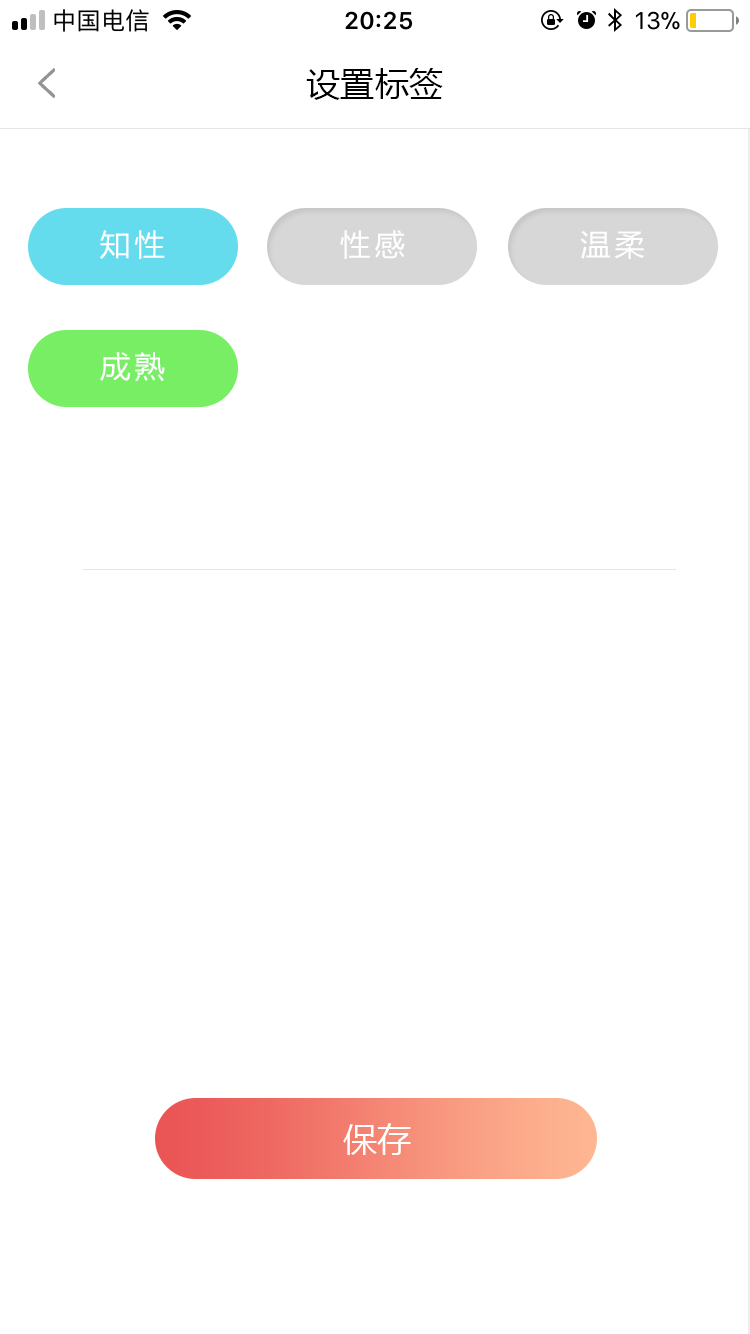
<style>
.page{position:relative;width:750px;height:1334px;background:#ffffff}
.page>*{position:absolute;margin:0}
.t1{font:34px "MicrosoftYaHei";letter-spacing:0.01em;color:#000000}
.t2{font:29.7px "MicrosoftYaHei";letter-spacing:0.13em;color:#ffffff}
.t3{font:34px "MicrosoftYaHei";letter-spacing:0.01em;color:#ffffff}
</style>
<div class="page">
<p class="t1" style="left:306px;top:68px;width:137px;height:32px">设置标签</p>
<p class="t2" style="left:100px;top:230px;width:65px;height:29px">知性</p>
<p class="t2" style="left:340px;top:230px;width:65px;height:29px">性感</p>
<p class="t2" style="left:580px;top:230px;width:64px;height:29px">温柔</p>
<p class="t2" style="left:100px;top:352px;width:65px;height:30px">成熟</p>
<p class="t3" style="left:343px;top:1123px;width:68px;height:32px">保存</p>
</div>
